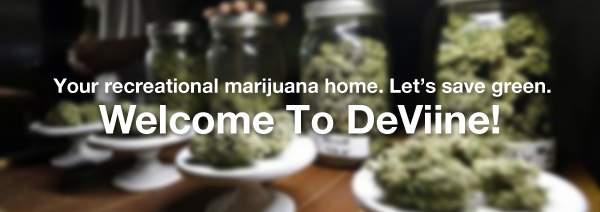
<style>
.page{position:relative;width:600px;height:212px}
.page>*{position:absolute;margin:0}
.t1{font:20px "HelveticaNeue-Bold";color:#ffffff}
.t2{font:40px "HelveticaNeue-Bold";color:#ffffff}
</style>
<div class="page">
<p class="t1" style="left:53px;top:78px;width:498px;height:19px">Your recreational marijuana home. Let’s save green.</p>
<p class="t2" style="left:98px;top:105px;width:401px;height:29px">Welcome To DeViine!</p>
</div>
